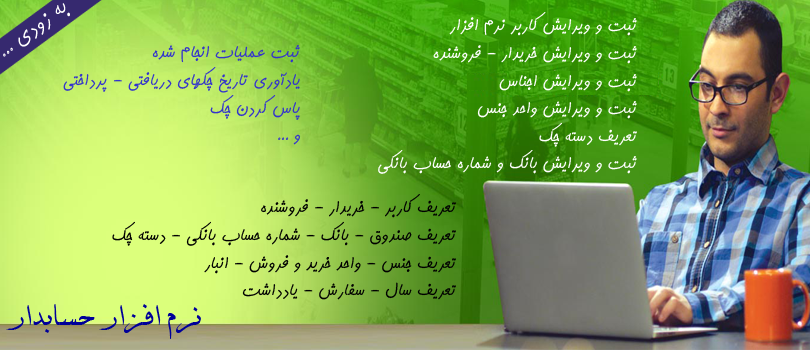
<style>
.page{position:relative;width:810px;height:350px}
.page>*{position:absolute;margin:0}
.t1{font:28px "KamranBold";color:#ffffff}
.t2{font:23px "KamranBold";color:#ffffff}
.t3{font:23px "KamranBold";color:#3333cc}
.t4{font:23px "KamranBold";color:#000000}
.t5{font:36px "BDavat";color:#000099}
</style>
<div class="page">
<p class="t1" style="left:3px;top:3px;width:67px;height:54px;rotate:-37deg">به زودي ...</p>
<p class="t2" style="left:378px;top:12px;width:259px;height:162px">ثبت و ويرايش کاربر نرم افزار<br>ثبت و ويرايش خريدار - فروشنده<br>ثبت و ويرايش اجناس<br>ثبت و ويرايش واحد جنس<br>تعريف دسته چک<br>ثبت و ويرايش بانک و شماره حساب بانکي</p>
<p class="t3" style="left:63px;top:45px;width:237px;height:100px">ثبت عمليات انجام شده<br>يادآوري تاريخ چکهاي دريافتي - پرداختي<br>پاس کردن چک<br>و ...</p>
<p class="t4" style="left:112px;top:194px;width:344px;height:106px">تعريف کاربر - خريدار - فروشنده<br>تعريف صندوق - بانک - شماره حساب بانکي - دسته چک<br>تعريف جنس - واحد خريد و فروش - انبار <br>تعريف سال - سفارش - يادداشت</p>
<p class="t5" style="left:6px;top:304px;width:195px;height:35px">نرم افزار حسابدار</p>
</div>
